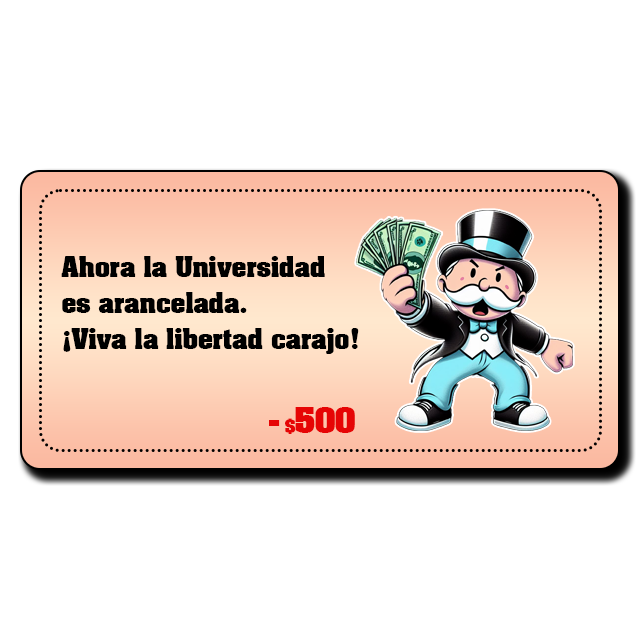
<style>
.page{position:relative;width:640px;height:640px;background:#ffffff}
.page>*{position:absolute;margin:0}
.t1{font:24px/36px "AardvarkBold";color:#000000}
.t2{font:30px "AardvarkBold";color:#e60505}
.t3{font:16px "AardvarkBold";color:#e60505}
</style>
<div class="page">
<p class="t1" style="left:61px;top:256px;width:298px;height:98px">Ahora la Universidad<br>es arancelada.<br>¡Viva la libertad carajo!</p>
<p class="t2" style="left:269px;top:407px;width:86px;height:27px">-<span class="t3"> $</span>500</p>
</div>
